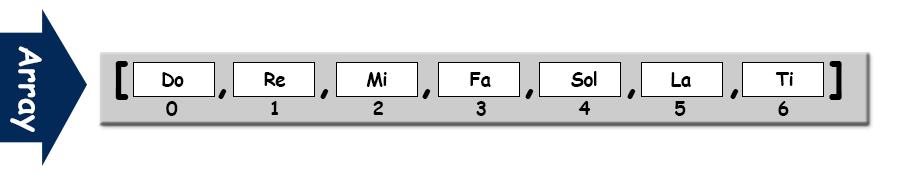
<style>
.page{position:relative;width:924px;height:177px;background:#ffffff}
.page>*{position:absolute;margin:0}
.t1{font:31.3px "ComicSansMS-Bold";color:#fffefe}
.t2{font:41.7px "ComicSansMS-Bold";letter-spacing:-0.025em;color:#000000}
.t3{font:18.8px "ComicSansMS-Bold";letter-spacing:-0.025em;color:#000000}
</style>
<div class="page">
<p class="t1" style="left:10px;top:46px;width:32px;height:86px;rotate:90deg">Array</p>
<p class="t2" style="left:115px;top:61px;width:727px;height:39px">[     ,     ,     ,     ,     ,     ,     ]</p>
<p class="t3" style="left:162px;top:72px;width:22px;height:15px">Do</p>
<p class="t3" style="left:264px;top:72px;width:22px;height:15px">Re</p>
<p class="t3" style="left:366px;top:72px;width:21px;height:15px">Mi</p>
<p class="t3" style="left:470px;top:72px;width:21px;height:15px">Fa</p>
<p class="t3" style="left:571px;top:71px;width:26px;height:16px">Sol</p>
<p class="t3" style="left:671px;top:72px;width:20px;height:15px">La</p>
<p class="t3" style="left:775px;top:72px;width:18px;height:14px">Ti</p>
<p class="t3" style="left:166px;top:101px;width:623px;height:15px">0            1            2            3            4           5            6</p>
</div>
